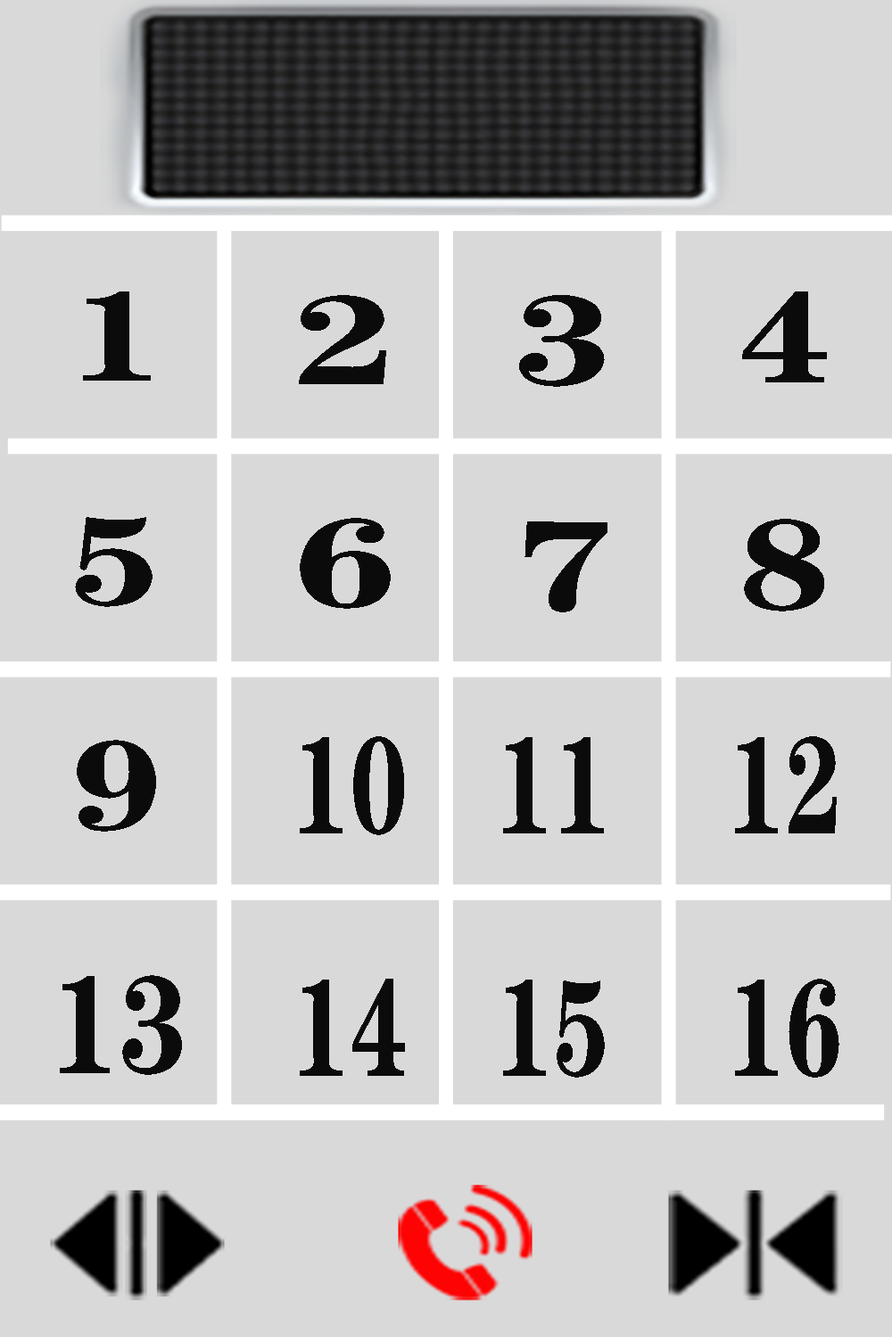
<style>
.page{position:relative;width:892px;height:1337px;background:#d9d9d9}
.page>*{position:absolute;margin:0}
.t1{font:128.5px "FZCHSJW--GB1-0";color:#0c0b0b;scale:1.27 1}
.t2{font:129.9px "FZCHSJW--GB1-0";color:#0c0b0b;scale:1.25 1}
.t3{font:127.7px "FZCHSJW--GB1-0";color:#0c0b0b;scale:1.45 1}
.t4{font:129px "FZCHSJW--GB1-0";color:#0c0b0b;scale:1.35 1}
.t5{font:138.9px "FZCHSJW--GB1-0";color:#0c0b0b;scale:0.73 1}
.t6{font:140px "FZCHSJW--GB1-0";color:#0c0b0b;scale:0.87 1}
</style>
<div class="page">
<p class="t1" style="left:75px;top:292px;width:81px;height:540px">1<br>5<br>9</p>
<p class="t2" style="left:742px;top:292px;width:85px;height:320px">4<br>8</p>
<p class="t3" style="left:299px;top:295px;width:92px;height:314px">2<br>6</p>
<p class="t4" style="left:519px;top:295px;width:88px;height:318px">3<br>7</p>
<p class="t5" style="left:300px;top:736px;width:539px;height:342px">10   11    12<br>14   15    16</p>
<p class="t6" style="left:60px;top:975px;width:122px;height:100px">13</p>
</div>
